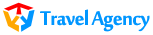
<style>
.page{position:relative;width:153px;height:35px;background:#ffffff}
.page>*{position:absolute;margin:0}
.t1{font:30px "MoolBoran";letter-spacing:-0.025em;color:#0096ff}
</style>
<div class="page">
<p class="t1" style="left:40px;top:9px;width:110px;height:23px">Travel Agency</p>
</div>
